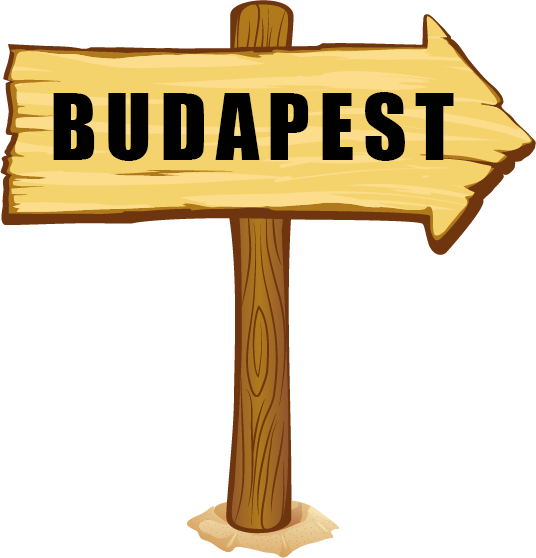
<style>
.page{position:relative;width:536px;height:558px;background:#ffffff}
.page>*{position:absolute;margin:0}
.t1{font:85px "Impact";letter-spacing:0.1em;color:#010100}
</style>
<div class="page">
<p class="t1" style="left:53px;top:92px;width:401px;height:69px">BUDAPEST</p>
</div>
